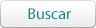
<style>
.page{position:relative;width:96px;height:28px}
.page>*{position:absolute;margin:0}
.t1{font:16px "MyriadPro-Regular";color:#008690}
</style>
<div class="page">
<p class="t1" style="left:28px;top:8px;width:43px;height:12px">Buscar</p>
</div>
